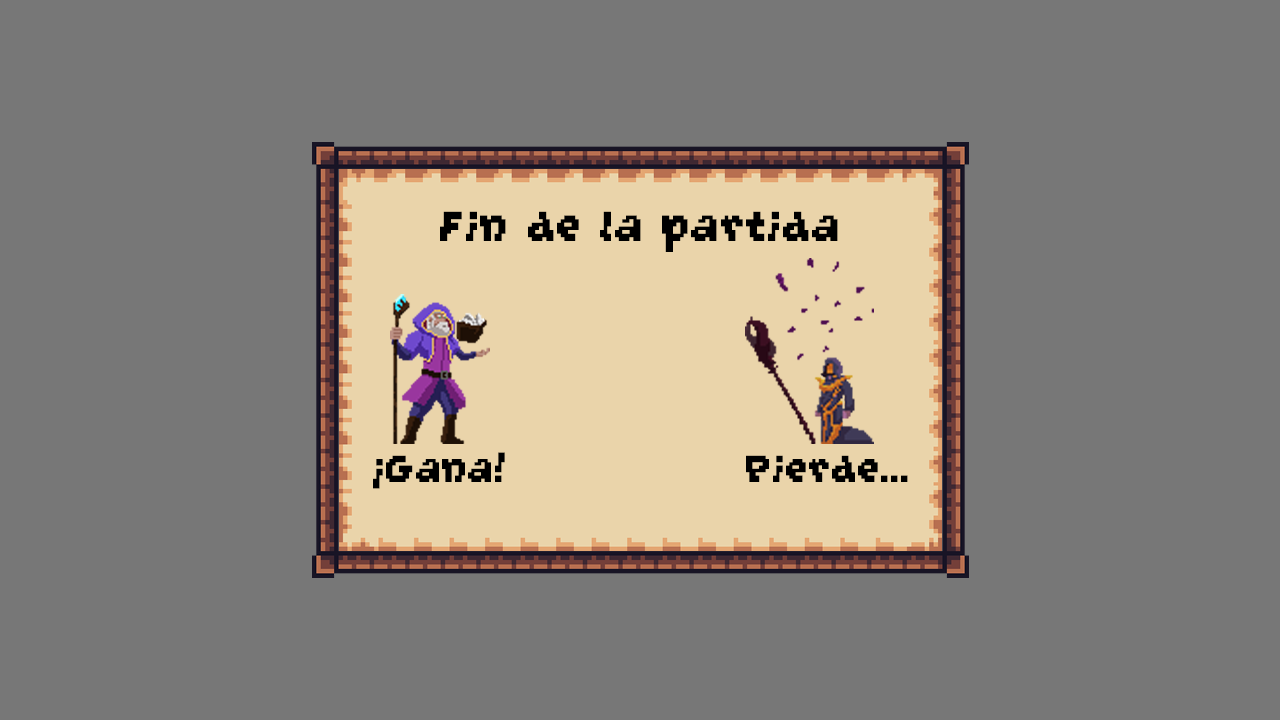
<style>
.page{position:relative;width:1280px;height:720px;background:#777777}
.page>*{position:absolute;margin:0}
.t1{font:58.3px "GrapeSoda";color:#000000}
.t2{font:52.5px "GrapeSoda";color:#000000}
</style>
<div class="page">
<p class="t1" style="left:440px;top:211px;width:398px;height:41px">Fin de la partida</p>
<p class="t2" style="left:373px;top:452px;width:132px;height:37px">¡Gana!</p>
<p class="t2" style="left:746px;top:455px;width:162px;height:27px">Pierde...</p>
</div>
